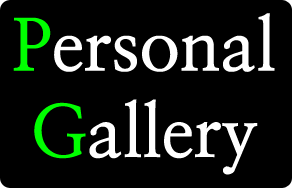
<style>
.page{position:relative;width:292px;height:188px;background:#000000}
.page>*{position:absolute;margin:0}
.t1{font:72px "NanumMyeongjoBold";color:#ffffff}
.t2{font:72px "NanumMyeongjoBold";color:#00ff00}
</style>
<div class="page">
<p class="t1" style="left:13px;top:13px;width:262px;height:162px;text-align:center"><span class="t2">P</span>ersonal<br><span class="t2">G</span>allery</p>
</div>
